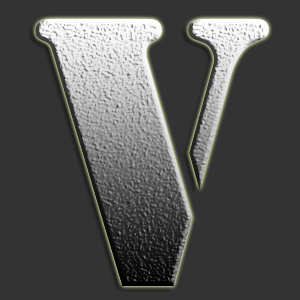
<style>
.page{position:relative;width:300px;height:300px;background:#333333}
.page>*{position:absolute;margin:0}
.t1{font:400.1px "Stencil"}
</style>
<div class="page">
<p class="t1" style="left:35px;top:18px;width:234px;height:268px">V</p>
</div>
